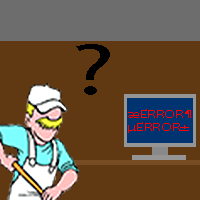
<style>
.page{position:relative;width:200px;height:200px;background:#603913}
.page>*{position:absolute;margin:0}
.t1{font:72px "MyriadPro-Regular";color:#000000;scale:1.5 1}
.t2{font:11px "MyriadPro-Regular";color:#fe0000;scale:1.5 1}
.t3{font:10px "MyriadPro-Regular";color:#fe0000;scale:1.5 1}
</style>
<div class="page">
<p class="t1" style="left:76px;top:44px;width:34px;height:51px">?</p>
<p class="t2" style="left:128px;top:109px;width:63px;height:24px"><span class="t3"><br></span>æERROR¶<br>µERROR±</p>
</div>
